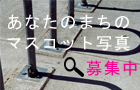
<style>
.page{position:relative;width:140px;height:90px}
.page>*{position:absolute;margin:0}
.t1{font:16.7px "MS-Gothic";letter-spacing:0.08em;color:#ffffff}
.t2{font:16.7px "MS-Gothic";letter-spacing:0.08em;color:#ff0090}
</style>
<div class="page">
<p class="t1" style="left:8px;top:14px;width:121px;height:16px">あなたのまちの</p>
<p class="t1" style="left:7px;top:35px;width:123px;height:16px">マスコット写真</p>
<p class="t2" style="left:86px;top:60px;width:51px;height:16px">募集中</p>
</div>
